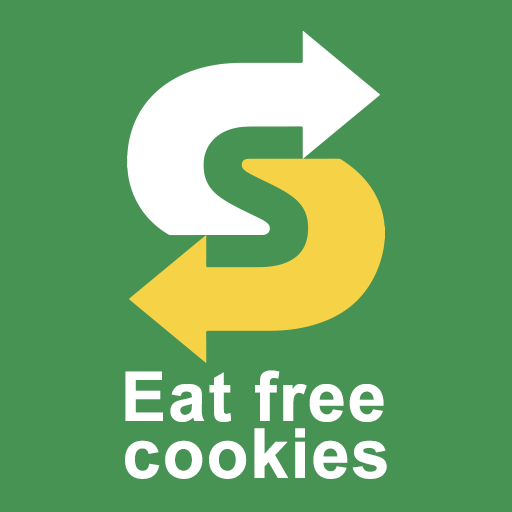
<style>
.page{position:relative;width:512px;height:512px;background:#469353}
.page>*{position:absolute;margin:0}
.t1{font:68.6px "Arial-BoldMT";letter-spacing:0.001em;color:#ffffff;font-weight:bold}
</style>
<div class="page">
<p class="t1" style="left:125px;top:370px;width:259px;height:52px">Eat free</p>
<p class="t1" style="left:125px;top:428px;width:262px;height:51px">cookies</p>
</div>
